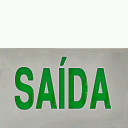
<style>
.page{position:relative;width:128px;height:128px;background:#f8fcf8}
.page>*{position:absolute;margin:0}
.t1{font:54.2px "Helvetica-Narrow-Bold";color:#009618;font-weight:bold;scale:0.67 1}
</style>
<div class="page">
<p class="t1" style="left:14px;top:56px;width:97px;height:54px">SAÍDA</p>
</div>
